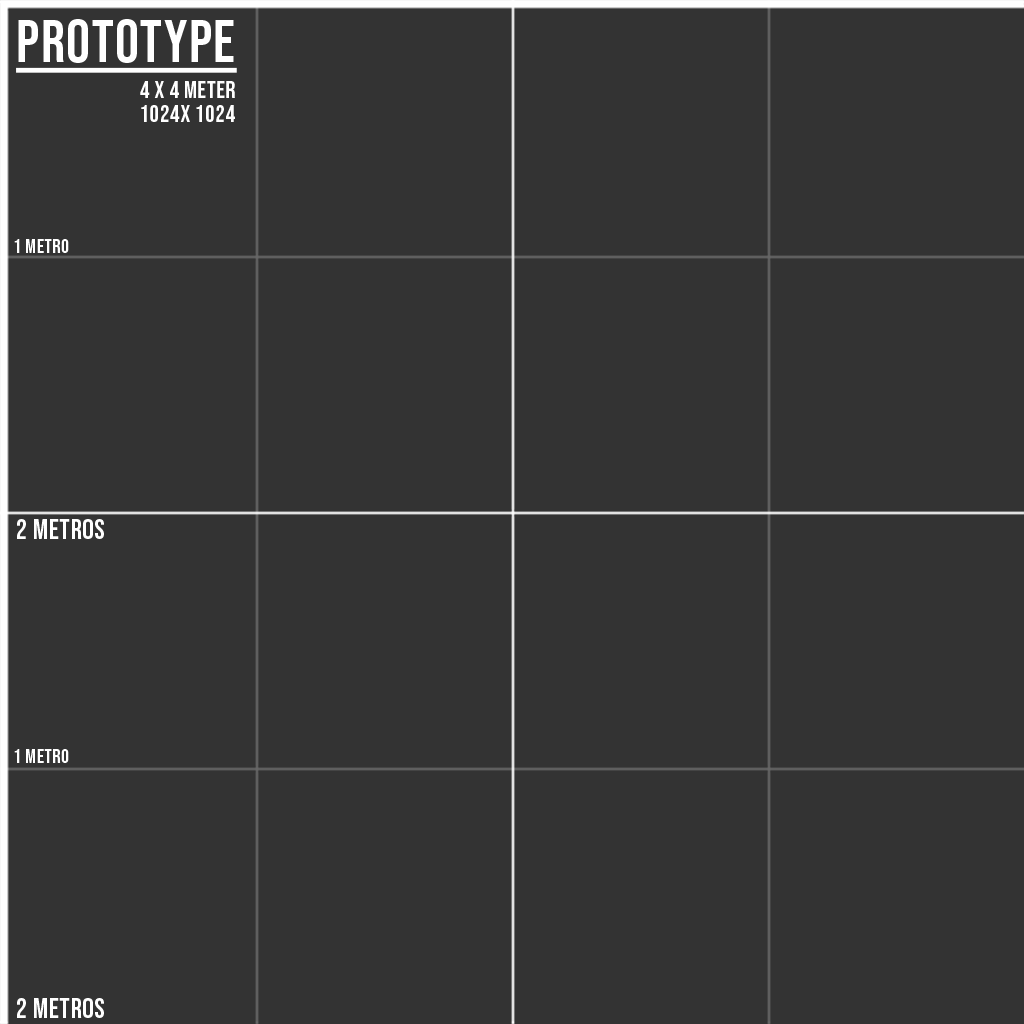
<style>
.page{position:relative;width:1024px;height:1024px;background:#333333}
.page>*{position:absolute;margin:0}
.t1{font:24px/36px "BebasNeue-Regular";letter-spacing:0.025em;color:#ffffff}
.t2{font:60px/36px "BebasNeue-Regular";letter-spacing:0.025em;color:#ffffff;text-decoration:underline}
.t3{font:24px/24px "BebasNeue-Regular";letter-spacing:0.025em;color:#ffffff}
.t4{font:20px "BebasNeue-Regular";letter-spacing:0.025em;color:#ffffff}
.t5{font:28px "BebasNeue-Regular";letter-spacing:0.025em;color:#ffffff}
</style>
<div class="page">
<p class="t1" style="left:16px;top:19px;width:221px;height:103px;text-align:right"><span class="t2">PROTOTYPE<br></span>4 x 4 METER<br><span class="t3">1024x 1024</span></p>
<p class="t4" style="left:14px;top:239px;width:55px;height:14px">1 metro</p>
<p class="t5" style="left:17px;top:519px;width:87px;height:20px">2 metros</p>
<p class="t4" style="left:14px;top:749px;width:55px;height:14px">1 metro</p>
<p class="t5" style="left:17px;top:998px;width:87px;height:20px">2 metros</p>
</div>
